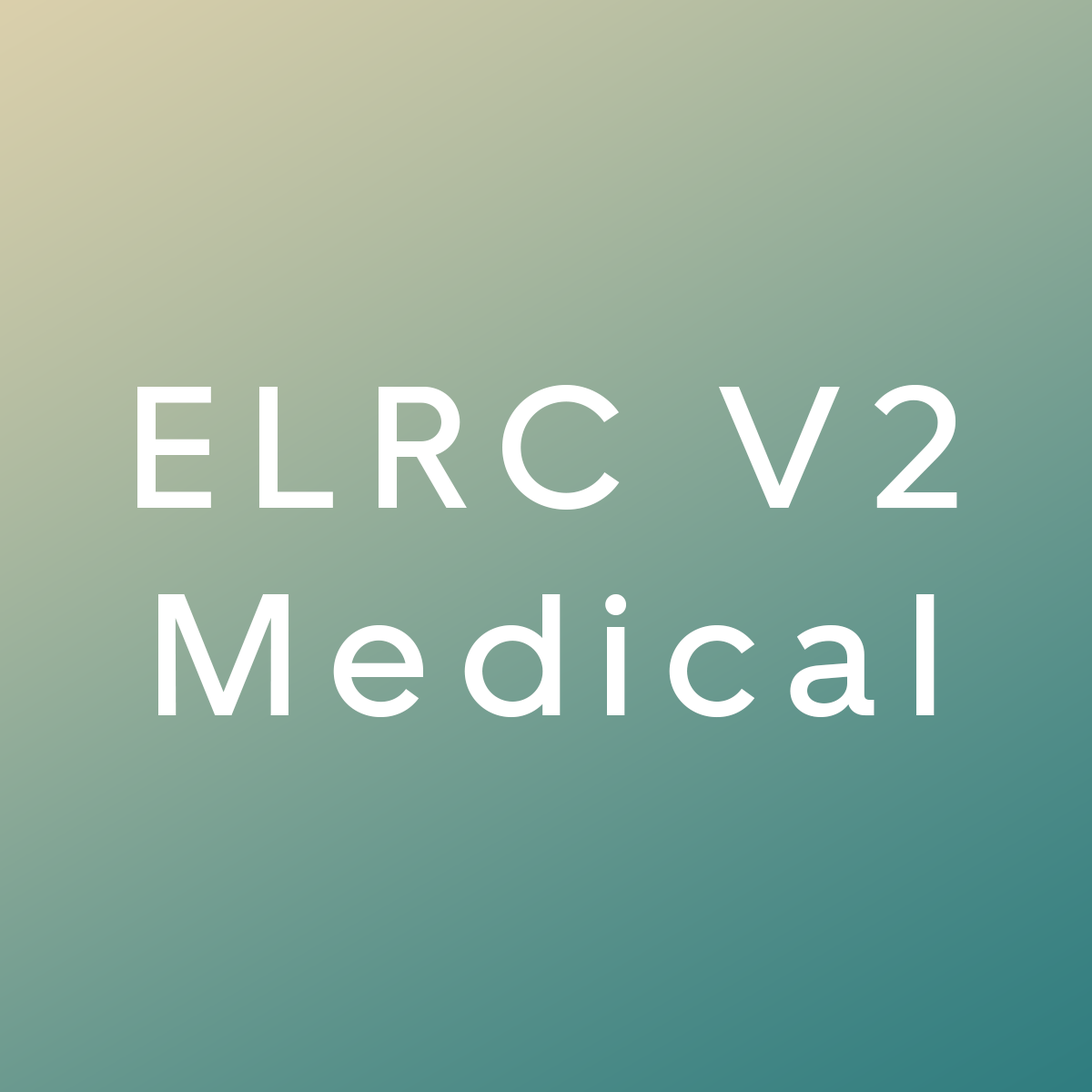
<style>
.page{position:relative;width:1092px;height:1092px}
.page>*{position:absolute;margin:0}
.t1{font:172.9px "UberMove-Medium";letter-spacing:0.18em;color:#ffffff}
</style>
<div class="page">
<p class="t1" style="left:137px;top:385px;width:820px;height:333px;text-align:center">ELRC V2<br>Medical</p>
</div>
